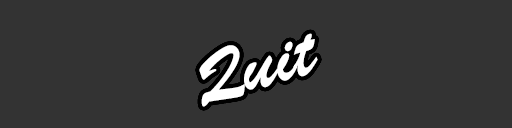
<style>
.page{position:relative;width:512px;height:128px;background:#333333}
.page>*{position:absolute;margin:0}
.t1{font:72px "BrushScriptStd";color:#ffffff}
</style>
<div class="page">
<p class="t1" style="left:199px;top:33px;width:119px;height:74px;rotate:-17deg">Quit</p>
</div>
